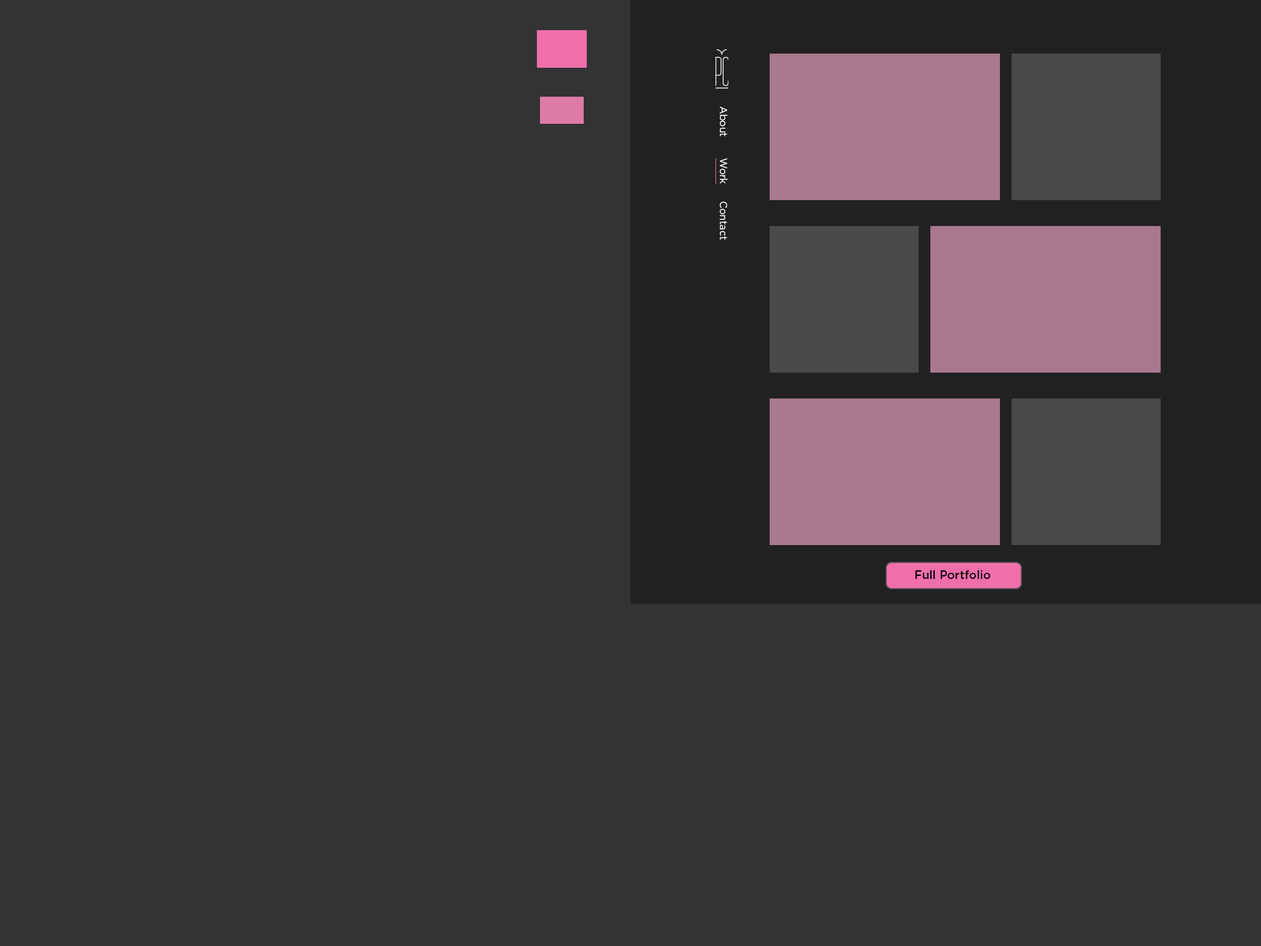
<style>
.page{position:relative;width:1261px;height:946px;background:#333333}
.page>*{position:absolute;margin:0}
.t1{font:9.9px "Gotham-Book";color:#fefefe}
.t2{font:11.7px "Gotham-Medium";color:#000000}
</style>
<div class="page">
<p class="t1" style="left:720px;top:107px;width:8px;height:30px;rotate:90deg">About</p>
<p class="t1" style="left:720px;top:158px;width:8px;height:25px;rotate:90deg">Work</p>
<p class="t1" style="left:720px;top:201px;width:7px;height:39px;rotate:90deg">Contact</p>
<p class="t2" style="left:915px;top:570px;width:76px;height:9px">Full Portfolio</p>
</div>
